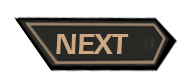
<style>
.page{position:relative;width:184px;height:77px;background:#ffffff}
.page>*{position:absolute;margin:0}
.t1{font:30px "037-CAI978";color:#cba783}
</style>
<div class="page">
<p class="t1" style="left:56px;top:34px;width:73px;height:20px">NEXT</p>
</div>
